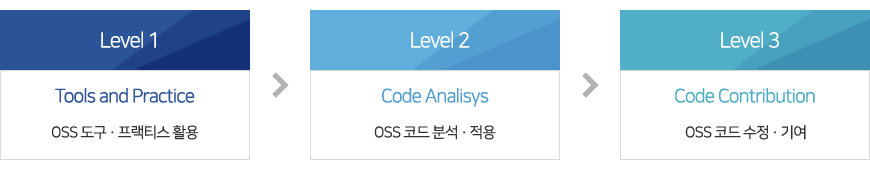
<style>
.page{position:relative;width:870px;height:170px;background:#ffffff}
.page>*{position:absolute;margin:0}
.t1{font:21px "NanumSquareR";letter-spacing:-0.05em;color:#ffffff}
.t2{font:19px "NanumSquareR";letter-spacing:-0.05em;color:#2b5398}
.t3{font:19px "NanumSquareR";letter-spacing:-0.05em;color:#549fd2}
.t4{font:19px "NanumSquareR";letter-spacing:-0.05em;color:#50afc6}
.t5{font:15px "NanumSquareR";letter-spacing:-0.05em;color:#333333}
</style>
<div class="page">
<p class="t1" style="left:101px;top:31px;width:55px;height:17px">Level 1</p>
<p class="t1" style="left:411px;top:31px;width:59px;height:17px">Level 2</p>
<p class="t1" style="left:721px;top:31px;width:58px;height:17px">Level 3</p>
<p class="t2" style="left:55px;top:88px;width:140px;height:15px">Tools and Practice</p>
<p class="t3" style="left:382px;top:88px;width:107px;height:19px">Code Analisys</p>
<p class="t4" style="left:675px;top:88px;width:140px;height:15px">Code Contribution</p>
<p class="t5" style="left:52px;top:125px;width:147px;height:15px">OSS 도구 · 프랙티스 활용</p>
<p class="t5" style="left:374px;top:125px;width:122px;height:15px">OSS 코드 분석 · 적용</p>
<p class="t5" style="left:685px;top:125px;width:121px;height:15px">OSS 코드 수정 · 기여</p>
</div>
